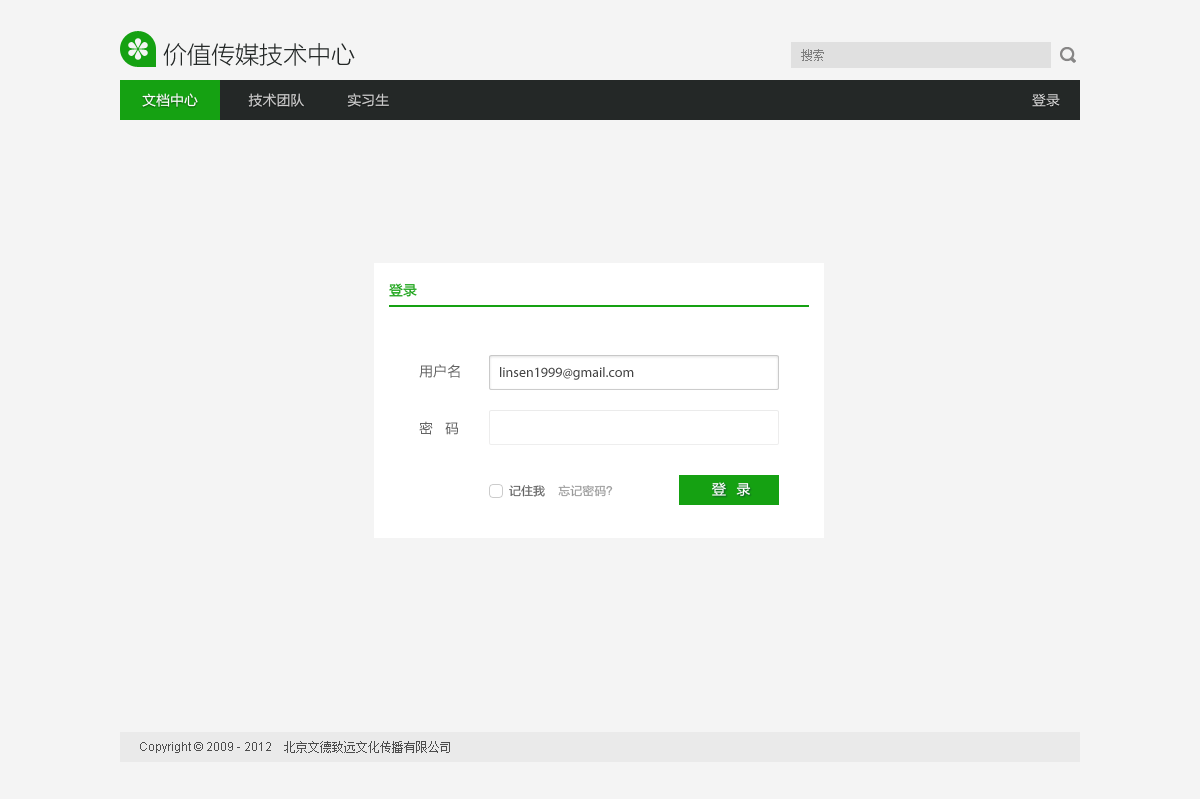
<style>
.page{position:relative;width:1200px;height:799px;background:#f4f4f4}
.page>*{position:absolute;margin:0}
.t1{font:24px "FZLTXHK--GBK1-0";color:#242827}
.t2{font:12px "SimSun";color:#7f7f7f}
.t3{font:14px "FZLTHJW--GB1-0";color:#cccccc}
.t4{font:14px "FZLTHJW--GB1-0";color:#ffffff}
.t5{font:14px "FZLTHJW--GB1-0";color:#dddddd}
.t6{font:14px "FZLTHJW--GB1-0";color:#15a112}
.t7{font:14px "FZLTHJW--GB1-0";letter-spacing:0.008em;color:#646464}
.t8{font:14px "MyriadPro-Regular";color:#444444}
.t9{font:12px "FZLTHJW--GB1-0";color:#999999}
.t10{font:12px "FZLTHJW--GB1-0";color:#646464}
.t11{font:14px "MicrosoftYaHei";letter-spacing:0.05em;color:#ffffff}
.t12{font:12px "ArialMT";color:#4d4d4d}
.t13{font:12px "SimSun";color:#4d4d4d}
</style>
<div class="page">
<p class="t1" style="left:163px;top:43px;width:192px;height:23px">价值传媒技术中心</p>
<p class="t2" style="left:801px;top:49px;width:23px;height:12px">搜索</p>
<p class="t3" style="left:142px;top:93px;width:247px;height:14px"><span class="t4">文档中心             </span>技术团队           实习生</p>
<p class="t5" style="left:1032px;top:93px;width:28px;height:14px">登录</p>
<p class="t6" style="left:389px;top:283px;width:28px;height:14px">登录</p>
<p class="t7" style="left:419px;top:364px;width:41px;height:14px">用户名</p>
<p class="t8" style="left:500px;top:367px;width:134px;height:13px">linsen1999@gmail.com</p>
<p class="t7" style="left:419px;top:421px;width:39px;height:14px">密   码</p>
<p class="t9" style="left:509px;top:485px;width:104px;height:12px"><span class="t10">记住我    </span>忘记密码？</p>
<p class="t11" style="left:712px;top:482px;width:39px;height:14px">登  录</p>
<p class="t12" style="left:140px;top:741px;width:310px;height:12px">Copyright © 2009 - 2012    <span class="t13">北京文德致远文化传播有限公司</span></p>
</div>
